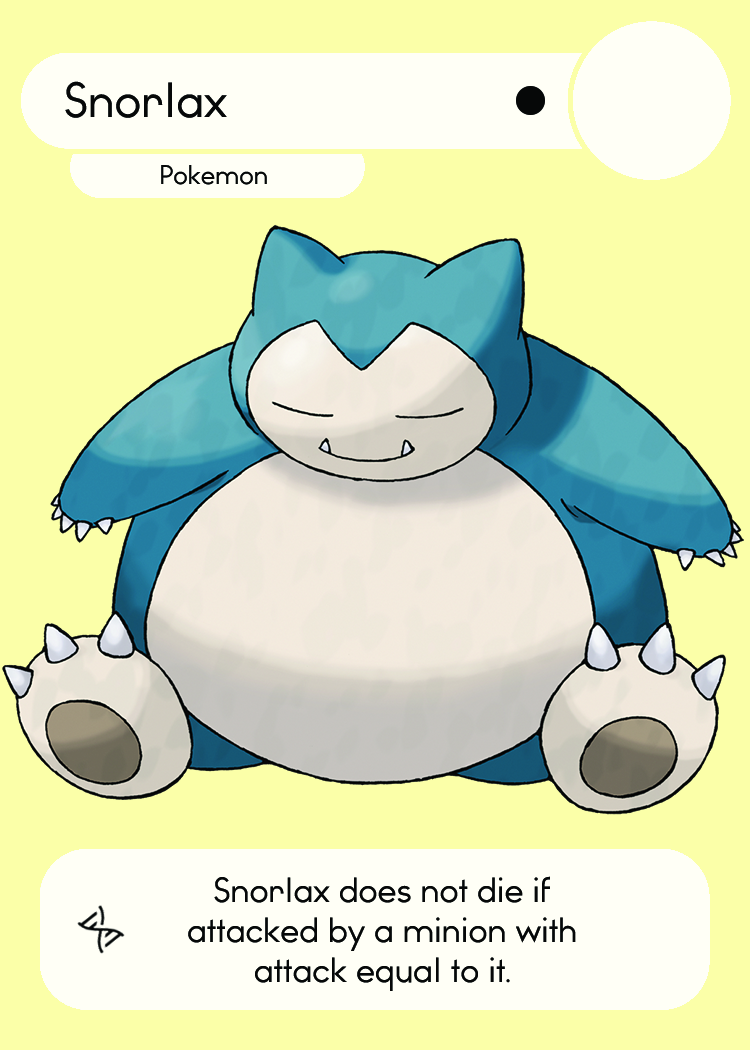
<style>
.page{position:relative;width:750px;height:1050px;background:#fbffa8}
.page>*{position:absolute;margin:0}
.t1{font:46.7px "WatchwordRegularDemo";color:#060808}
.t2{font:25.5px "WatchwordRegularDemo";color:#060808}
.t3{font:33.3px "WatchwordRegularDemo";color:#060808}
.t4{font:29.2px "Dosis-Medium";color:#060808}
</style>
<div class="page">
<p class="t1" style="left:65px;top:81px;width:162px;height:37px">Snorlax</p>
<p class="t2" style="left:161px;top:165px;width:106px;height:20px">Pokemon</p>
<p class="t3" style="left:188px;top:876px;width:388px;height:115px;text-align:center">Snorlax does not die if<br>attacked by a minion with<br>attack equal to it<span class="t4">.</span></p>
</div>
